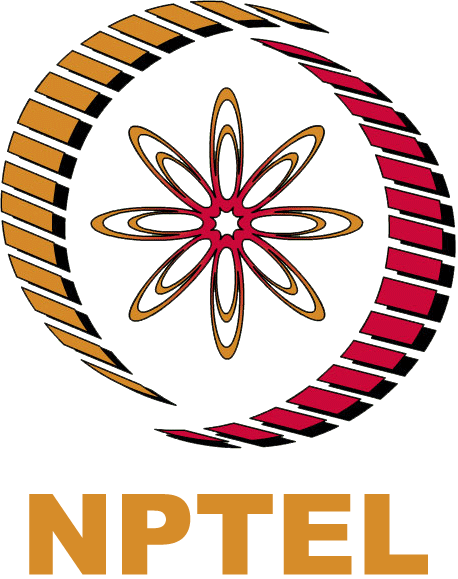
<style>
.page{position:relative;width:458px;height:579px;background:#ffffff}
.page>*{position:absolute;margin:0}
.t1{font:111.8px "Arial-Black";color:#d68c29}
</style>
<div class="page">
<p class="t1" style="left:29px;top:494px;width:399px;height:81px">NPTEL</p>
</div>
